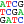
<style>
.page{position:relative;width:24px;height:24px;background:#ffffff}
.page>*{position:absolute;margin:0}
.t1{font:10px "Courier"}
</style>
<div class="page">
<p class="t1" style="left:0px;top:1px;width:24px;height:6px">ATCG</p>
<p class="t1" style="left:0px;top:9px;width:24px;height:6px">TCGA</p>
<p class="t1" style="left:0px;top:17px;width:23px;height:6px">GATC</p>
</div>
